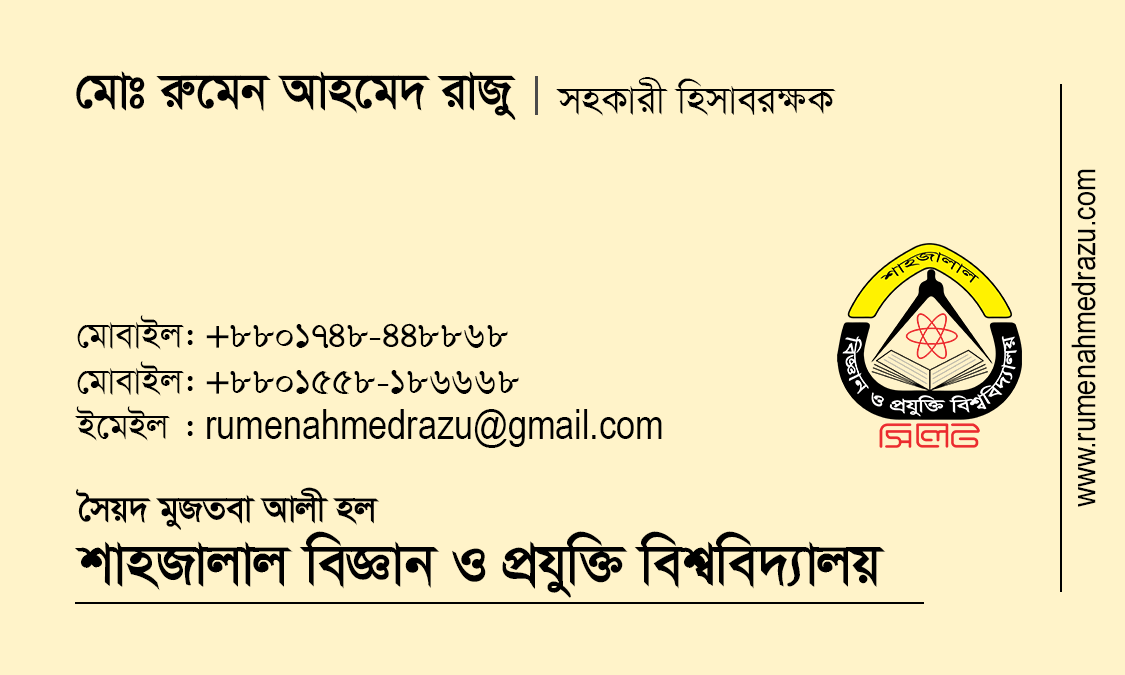
<style>
.page{position:relative;width:1125px;height:675px;background:#fff3c9}
.page>*{position:absolute;margin:0}
.t1{font:58.3px "SutonnyMJ-Bold";color:#000000}
.t2{font:45.8px "SutonnyMJ-Regular";color:#000000}
.t3{font:33.3px "ArialNarrow";color:#000000}
.t4{font:41.7px/45.8px "SutonnyMJ-Regular";color:#000000}
.t5{font:41.7px/45.8px "ArialNarrow";color:#000000}
.t6{font:66.7px/62.5px "SutonnyMJ-Bold";color:#000000}
.t7{font:41.7px/62.5px "SutonnyMJ-Bold";color:#000000}
</style>
<div class="page">
<p class="t1" style="left:76px;top:71px;width:440px;height:49px">†gvt iæ‡gb Avn‡g` ivRy</p>
<p class="t2" style="left:556px;top:77px;width:280px;height:39px">mnKvix wnmveiÿK</p>
<p class="t3" style="left:1071px;top:169px;width:25px;height:338px;rotate:-90deg">www.rumenahmedrazu.com</p>
<p class="t4" style="left:75px;top:315px;width:587px;height:133px">†gvevBj : +8801748-448868 <br>†gvevBj : +8801558-186668<br>B‡gBj : <span class="t5">rumenahmedrazu@gmail.com</span></p>
<p class="t6" style="left:75px;top:487px;width:811px;height:111px"><span class="t7">ˆmq` gyRZev Avjx nj<br></span>kvnRvjvj weÁvb I cÖhyw³ wek^we`¨vjq</p>
</div>
